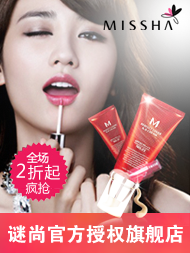
<style>
.page{position:relative;width:190px;height:253px}
.page>*{position:absolute;margin:0}
.t1{font:15.5px "MicrosoftYaHei";letter-spacing:0.08em;color:#ffffff}
.t2{font:18.5px "MicrosoftYaHei";letter-spacing:0.08em;color:#ffffff}
.t3{font:12.3px "MicrosoftYaHei";color:#ffffff}
.t4{font:19.7px "FZDHTJW--GB1-0";color:#ffffff}
</style>
<div class="page">
<p class="t1" style="left:16px;top:163px;width:44px;height:17px"><span class="t2">2</span>折起</p>
<p class="t3" style="left:25px;top:182px;width:25px;height:12px">疯抢</p>
<p class="t4" style="left:8px;top:224px;width:175px;height:20px">谜尚官方授权旗舰店</p>
</div>
